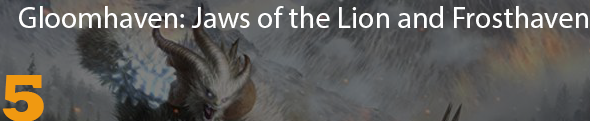
<style>
.page{position:relative;width:590px;height:121px}
.page>*{position:absolute;margin:0}
.t1{font:30px "MyriadPro-Regular";color:#ffffff}
.t2{font:70px "Rockwell-ExtraBold";color:#f09911}
</style>
<div class="page">
<p class="t1" style="left:19px;top:6px;width:569px;height:22px">Gloomhaven: Jaws of the Lion and Frosthaven</p>
<p class="t2" style="left:2px;top:75px;width:42px;height:47px">5</p>
</div>
